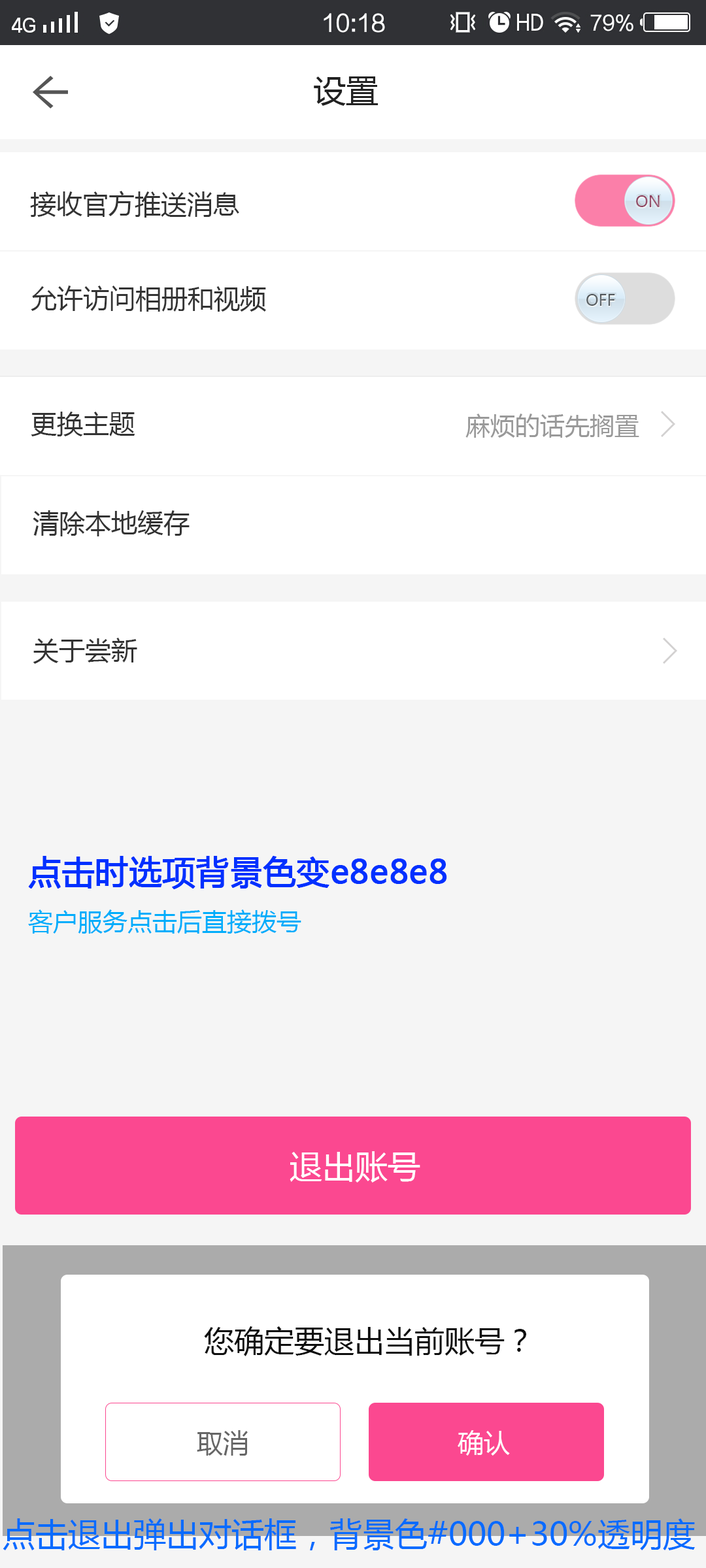
<style>
.page{position:relative;width:706px;height:1568px;background:#ffffff}
.page>*{position:absolute;margin:0}
.t1{font:32.7px "MicrosoftYaHei";color:#222222}
.t2{font:26.1px "MicrosoftYaHei";color:#333333}
.t3{font:15.7px "MicrosoftYaHei";color:#934c68}
.t4{font:15.7px "MicrosoftYaHei";color:#595f63}
.t5{font:24.8px "MicrosoftYaHei";color:#999999}
.t6{font:32.7px "MicrosoftYaHei";color:#0030ff;font-weight:bold}
.t7{font:24.8px "MicrosoftYaHei";color:#00adfb}
.t8{font:32.7px "MicrosoftYaHei";color:#ffffff}
.t9{font:30.1px "MicrosoftYaHei";color:#0e0e0e}
.t10{font:26.1px "MicrosoftYaHei";color:#666666}
.t11{font:26.1px "MicrosoftYaHei";color:#ffffff}
.t12{font:32.7px "MicrosoftYaHei";color:#086bff}
</style>
<div class="page">
<p class="t1" style="left:314px;top:76px;width:64px;height:30px">设置</p>
<p class="t2" style="left:30px;top:191px;width:209px;height:27px">接收官方推送消息</p>
<p class="t3" style="left:636px;top:195px;width:23px;height:12px">ON</p>
<p class="t2" style="left:31px;top:286px;width:235px;height:26px">允许访问相册和视频</p>
<p class="t4" style="left:586px;top:294px;width:29px;height:12px">OFF</p>
<p class="t2" style="left:31px;top:412px;width:104px;height:24px">更换主题</p>
<p class="t5" style="left:465px;top:414px;width:174px;height:24px">麻烦的话先搁置</p>
<p class="t2" style="left:33px;top:510px;width:156px;height:26px">清除本地缓存</p>
<p class="t2" style="left:33px;top:638px;width:104px;height:26px">关于尝新</p>
<p class="t6" style="left:28px;top:856px;width:419px;height:33px">点击时选项背景色变e8e8e8</p>
<p class="t7" style="left:28px;top:909px;width:273px;height:25px">客户服务点击后直接拨号</p>
<p class="t8" style="left:289px;top:1151px;width:131px;height:32px">退出账号</p>
<p class="t9" style="left:204px;top:1326px;width:322px;height:30px">您确定要退出当前账号？</p>
<p class="t10" style="left:197px;top:1430px;width:51px;height:26px">取消</p>
<p class="t11" style="left:457px;top:1430px;width:53px;height:26px">确认</p>
<p class="t12" style="left:3px;top:1518px;width:691px;height:32px">点击退出弹出对话框，背景色#000+30%透明度</p>
</div>
